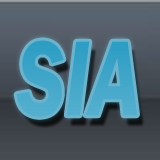
<style>
.page{position:relative;width:160px;height:160px}
.page>*{position:absolute;margin:0}
.t1{font:110px "FranklinGothic-DemiItalic";color:#42a7c9;scale:0.76 1}
</style>
<div class="page">
<p class="t1" style="left:16px;top:40px;width:121px;height:77px">SIA</p>
</div>
